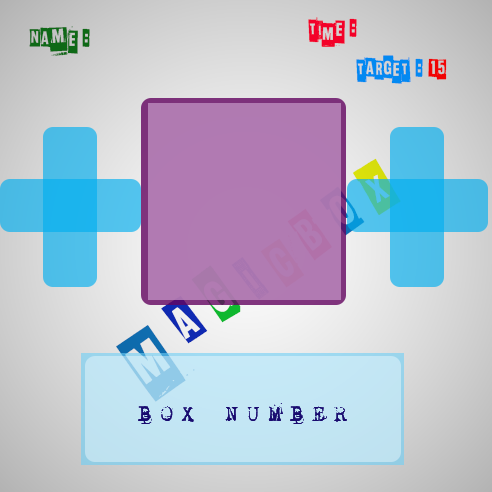
<style>
.page{position:relative;width:492px;height:492px}
.page>*{position:absolute;margin:0}
.t1{font:34.7px "Slaveonlydreamstobeking";color:#f30129}
.t2{font:34.7px "Slaveonlydreamstobeking";color:#0e6916}
.t3{font:34.7px "Slaveonlydreamstobeking";color:#0389f1}
.t4{font:34.7px "Slaveonlydreamstobeking";color:#f10303}
.t5{font:100px "Slaveonlydreamstobeking";letter-spacing:0.219em}
.t6{font:83.3px "Slaveonlydreamstobeking";letter-spacing:0.219em}
</style>
<div class="page">
<p class="t1" style="left:308px;top:17px;width:49px;height:31px">TIME :</p>
<p class="t2" style="left:29px;top:26px;width:61px;height:30px">NAmE :</p>
<p class="t3" style="left:356px;top:55px;width:91px;height:29px">TARGET : <span class="t4">15</span></p>
<p class="t5" style="left:116px;top:158px;width:285px;height:244px;rotate:-37deg">M<span class="t6">A</span><span class="t6">G</span><span class="t6">I</span><span class="t6">C</span><span class="t6">B</span><span class="t6">O</span><span class="t6">X</span></p>
</div>
